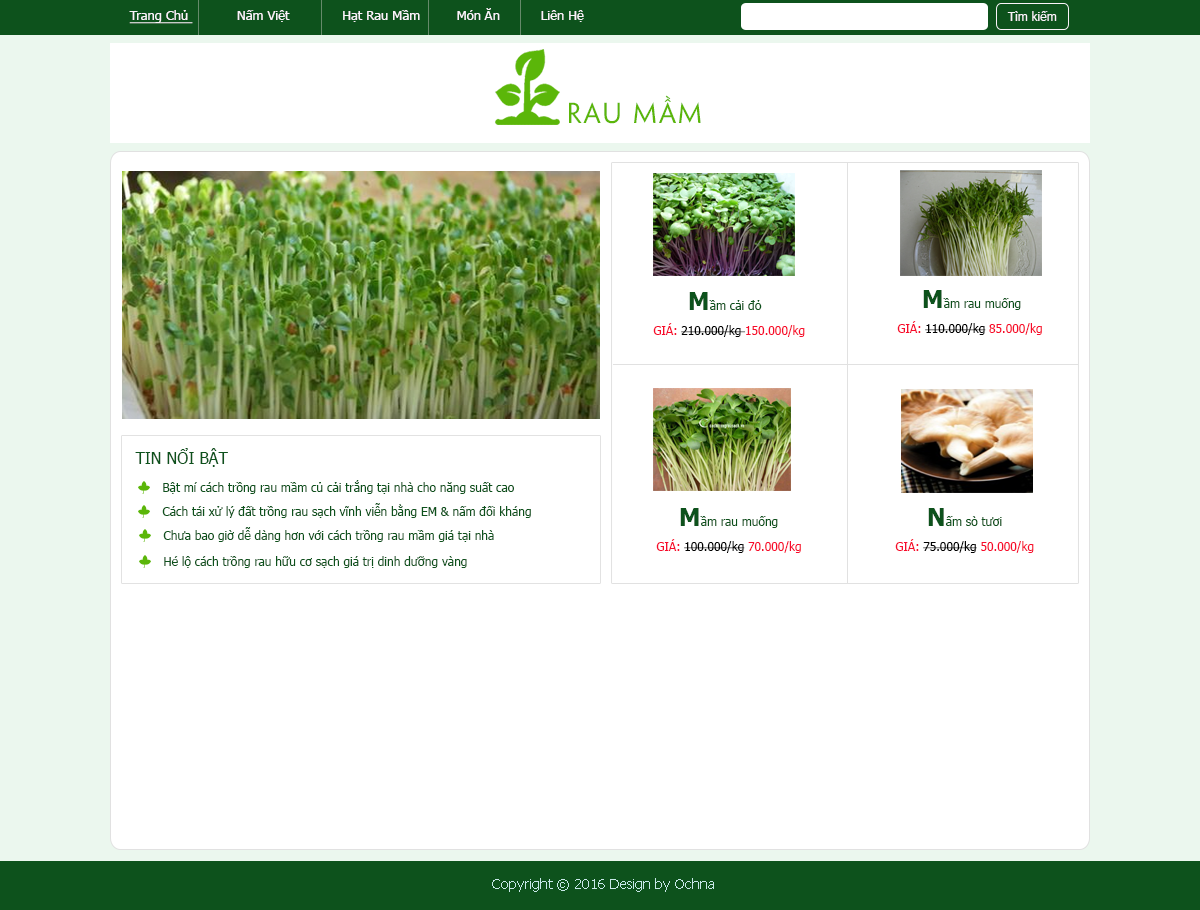
<style>
.page{position:relative;width:1200px;height:910px;background:#ffffff}
.page>*{position:absolute;margin:0}
.t1{font:13px "Tahoma";color:#faf4fa}
.t2{font:13px "Tahoma";color:#faf4fa;text-decoration:underline}
.t3{font:12px "Tahoma";color:#faf4fa}
.t4{font:26px "UTM-Penumbra";letter-spacing:0.075em;color:#5bb609}
.t5{font:12px "Tahoma";color:#0d521c}
.t6{font:24px "Tahoma-Bold";color:#0d521c}
.t7{font:12px "Tahoma";color:#030303}
.t8{font:12px "Tahoma";color:#f70b2c}
.t9{font:12px "Tahoma";color:#000000}
.t10{font:16px "Tahoma";color:#0d521c}
.t11{font:12px "Tahoma";color:#010101}
.t12{font:14px "Tahoma";color:#c7e8e8}
</style>
<div class="page">
<p class="t1" style="left:129px;top:8px;width:455px;height:16px"><span class="t2">Trang Chủ </span>           Nấm Việt             Hạt Rau Mầm         Món Ăn          Liên Hệ</p>
<p class="t3" style="left:1007px;top:11px;width:50px;height:10px">Tìm kiếm</p>
<p class="t4" style="left:569px;top:95px;width:132px;height:29px">Rau mầm</p>
<p class="t5" style="left:689px;top:292px;width:73px;height:18px"><span class="t6">M</span>ầm cải đỏ</p>
<p class="t5" style="left:923px;top:290px;width:98px;height:20px"><span class="t6">M</span>ầm rau muống</p>
<p class="t7" style="left:653px;top:323px;width:152px;height:14px"><span class="t8">GIÁ: </span>210.000/kg <span class="t8">150.000/kg</span></p>
<p class="t9" style="left:897px;top:321px;width:145px;height:14px"><span class="t8">GIÁ: </span>110.000/kg<span class="t8"> 85.000/kg</span></p>
<p class="t10" style="left:135px;top:448px;width:93px;height:19px">TIN NỔI BẬT</p>
<p class="t5" style="left:163px;top:480px;width:351px;height:14px">Bật mí cách trồng rau mầm củ cải trắng tại nhà cho năng suất cao</p>
<p class="t5" style="left:162px;top:503px;width:369px;height:15px">Cách tái xử lý đất trồng rau sạch vĩnh viễn bằng EM &amp; nấm đối kháng</p>
<p class="t5" style="left:680px;top:508px;width:98px;height:20px"><span class="t6">M</span>ầm rau muống</p>
<p class="t5" style="left:928px;top:508px;width:74px;height:18px"><span class="t6">N</span>ấm sò tươi</p>
<p class="t5" style="left:163px;top:527px;width:331px;height:15px">Chưa bao giờ dễ dàng hơn với cách trồng rau mầm giá tại nhà</p>
<p class="t11" style="left:656px;top:539px;width:145px;height:14px"><span class="t8">GIÁ: </span>100.000/kg<span class="t8"> 70.000/kg</span></p>
<p class="t9" style="left:895px;top:539px;width:139px;height:14px"><span class="t8">GIÁ: </span>75.000/kg<span class="t8"> 50.000/kg</span></p>
<p class="t5" style="left:164px;top:556px;width:303px;height:12px">Hé lộ cách trồng rau hữu cơ sạch giá trị dinh dưỡng vàng</p>
<p class="t12" style="left:492px;top:878px;width:222px;height:14px">Copyright © 2016 Design by Ochna</p>
</div>
